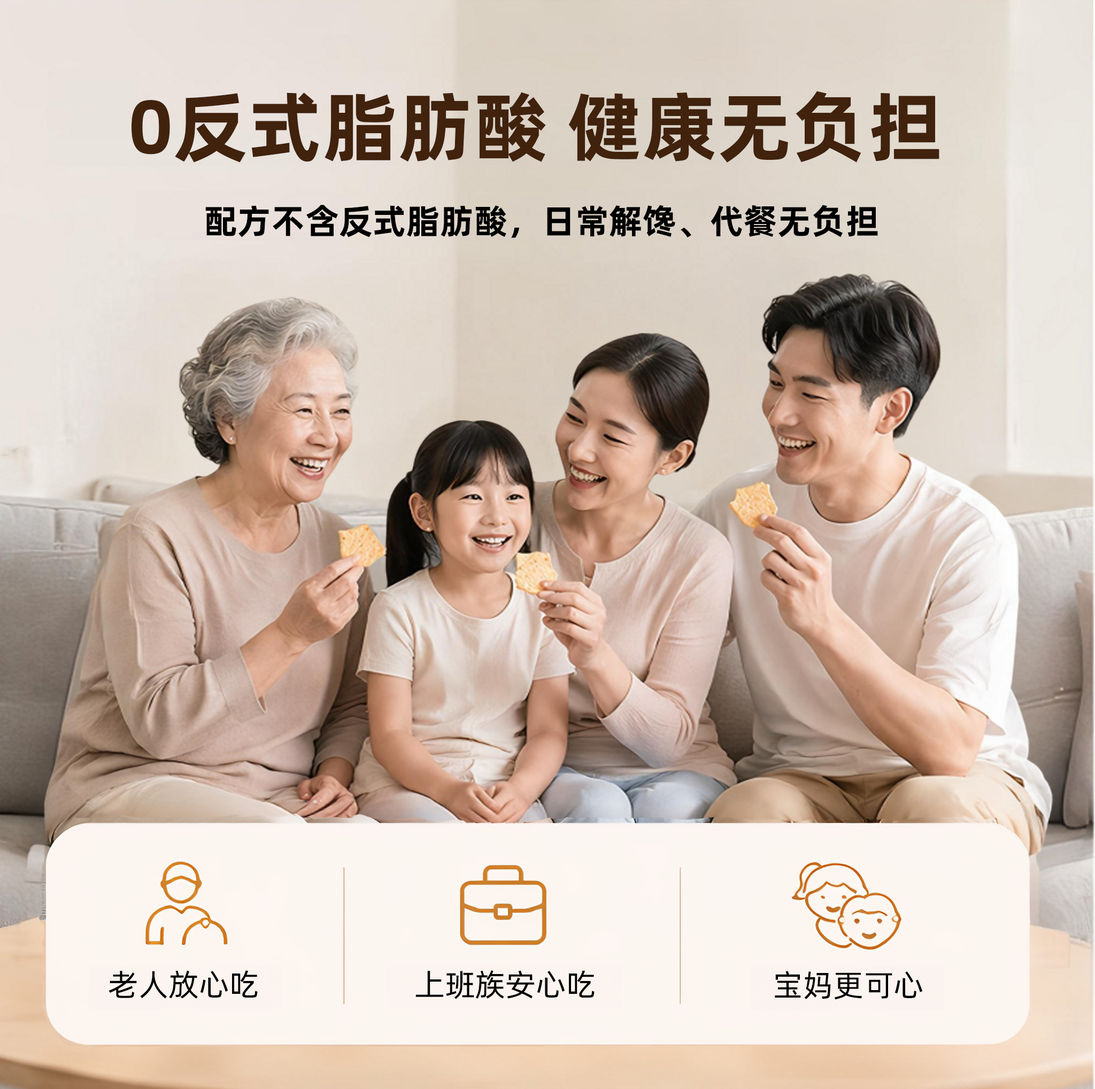
<style>
.page{position:relative;width:1095px;height:1089px}
.page>*{position:absolute;margin:0}
.t1{font:76.2px "AlibabaPuHuiTi-Bold";color:#40220d}
.t2{font:34.3px "AlibabaPuHuiTi-Bold";color:#000000}
.t3{font:30.7px "AlibabaPuHuiTi-Regular";color:#000000}
</style>
<div class="page">
<p class="t1" style="left:131px;top:91px;width:808px;height:72px">0反式脂肪酸 健康无负担</p>
<p class="t2" style="left:205px;top:205px;width:673px;height:33px">配方不含反式脂肪酸，日常解馋、代餐无负担</p>
<p class="t3" style="left:109px;top:970px;width:149px;height:29px">老人放心吃</p>
<p class="t3" style="left:415px;top:970px;width:180px;height:29px">上班族安心吃</p>
<p class="t3" style="left:775px;top:971px;width:147px;height:29px">宝妈更可心</p>
</div>
